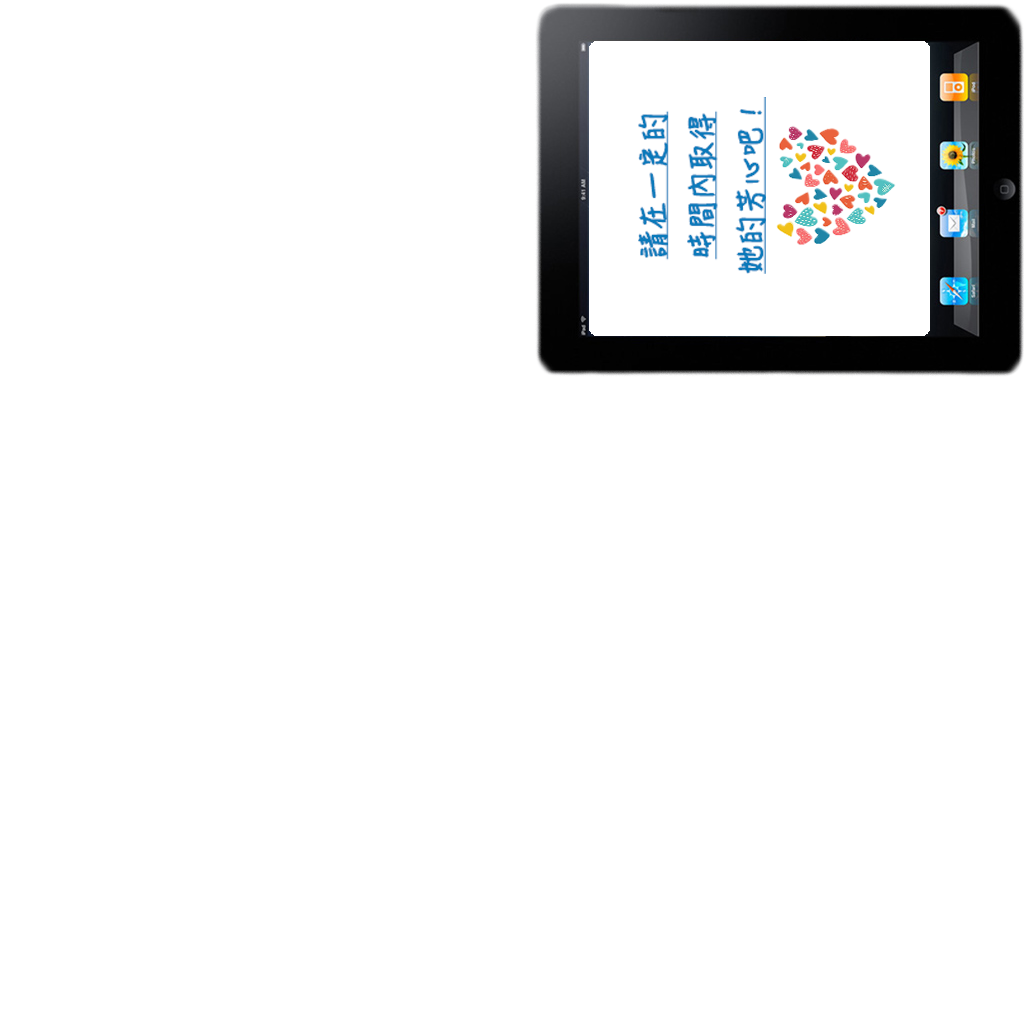
<style>
.page{position:relative;width:1024px;height:1024px;background:#ffffff}
.page>*{position:absolute;margin:0}
.t1{font:27.9px "HanziPenTC-W5";color:#0979ba;font-weight:bold;text-decoration:underline}
</style>
<div class="page">
<p class="t1" style="left:638px;top:97px;width:128px;height:177px;text-align:center;rotate:-90deg">請在一定的<br>時間內取得<br>她的芳心吧！</p>
</div>
